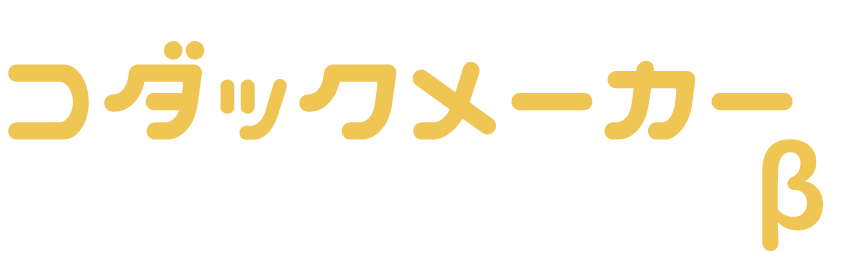
<style>
.page{position:relative;width:865px;height:280px;background:#ffffff}
.page>*{position:absolute;margin:0}
.t1{font:130px "NicoMoji+";color:#efc654}
.t2{font:110px "NicoMoji+";color:#efc654}
</style>
<div class="page">
<p class="t1" style="left:8px;top:41px;width:785px;height:99px">コダックメーカー</p>
<p class="t2" style="left:762px;top:139px;width:61px;height:112px">β</p>
</div>
